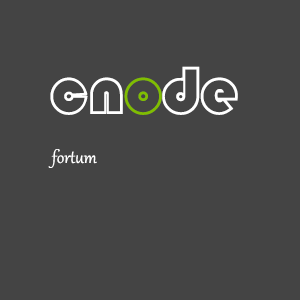
<style>
.page{position:relative;width:300px;height:300px;background:#444444}
.page>*{position:absolute;margin:0}
.t1{font:66.7px "STCaiyun";color:#ffffff}
.t2{font:66.7px "STCaiyun";color:#80bd01}
.t3{font:20.9px "Gabriola";color:#ffffff}
</style>
<div class="page">
<p class="t1" style="left:50px;top:66px;width:188px;height:49px">cn<span class="t2">o</span>de</p>
<p class="t3" style="left:48px;top:149px;width:49px;height:19px">fortum</p>
</div>
